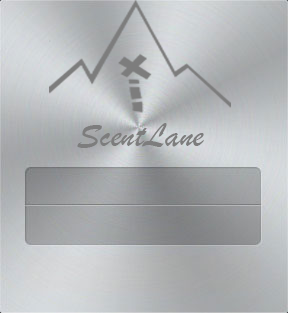
<style>
.page{position:relative;width:288px;height:313px}
.page>*{position:absolute;margin:0}
.t1{font:36px "BrushScriptMT";color:#8d8f91}
</style>
<div class="page">
<p class="t1" style="left:77px;top:123px;width:127px;height:25px">ScentLane</p>
</div>
